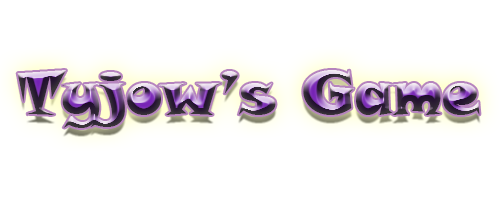
<style>
.page{position:relative;width:500px;height:200px;background:#ffffff}
.page>*{position:absolute;margin:0}
.t1{font:60px "SnapITC-Regular"}
</style>
<div class="page">
<p class="t1" style="left:17px;top:70px;width:463px;height:58px">Tyjow’s Game</p>
</div>
